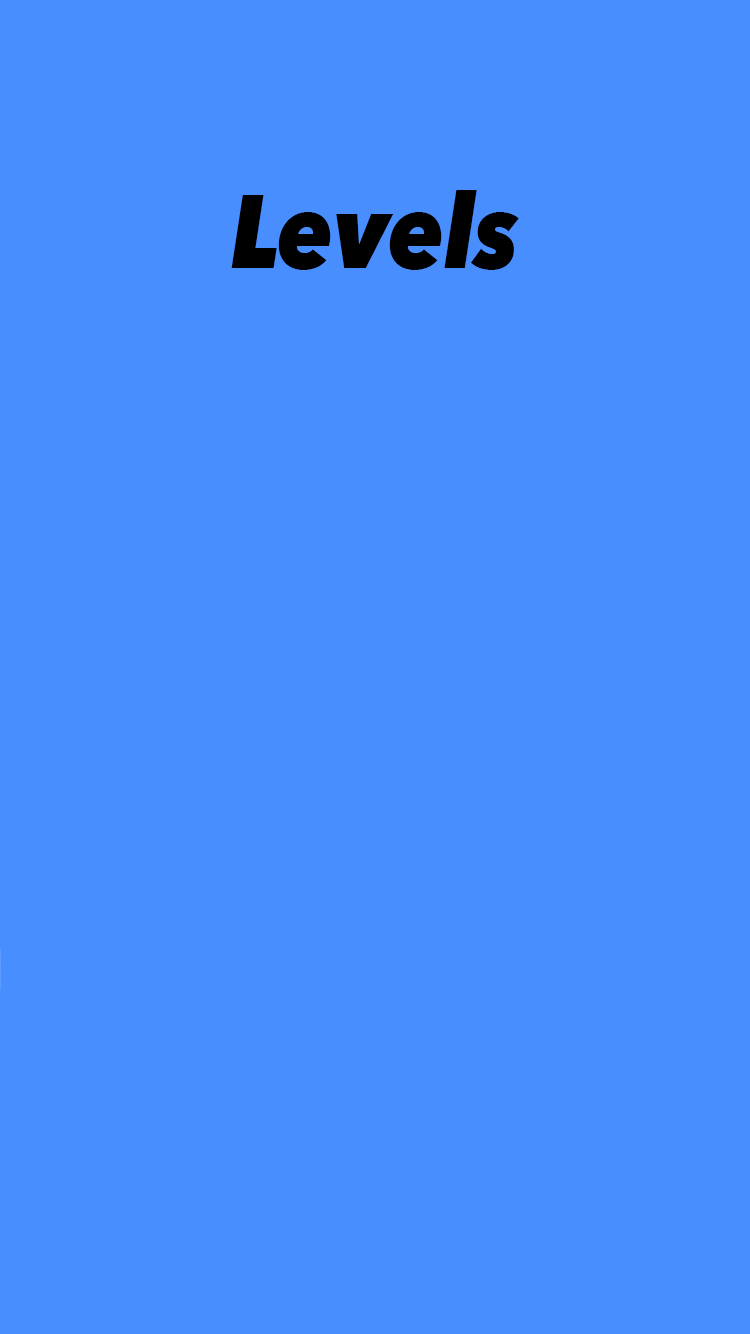
<style>
.page{position:relative;width:750px;height:1334px;background:#498eff}
.page>*{position:absolute;margin:0}
.t1{font:102.8px "AvenirNext-HeavyItalic";color:#000000;scale:0.87 1}
</style>
<div class="page">
<p class="t1" style="left:231px;top:190px;width:288px;height:80px">Levels</p>
</div>
